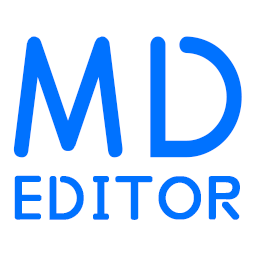
<style>
.page{position:relative;width:256px;height:256px;background:#ffffff}
.page>*{position:absolute;margin:0}
.t1{font:179.5px "xiaowei";color:#0072ff;font-weight:bold}
.t2{font:63.9px "xiaowei";color:#0072ff;font-weight:bold}
</style>
<div class="page">
<p class="t1" style="left:13px;top:36px;width:229px;height:122px">MD</p>
<p class="t2" style="left:14px;top:175px;width:226px;height:45px">EDITOR</p>
</div>
